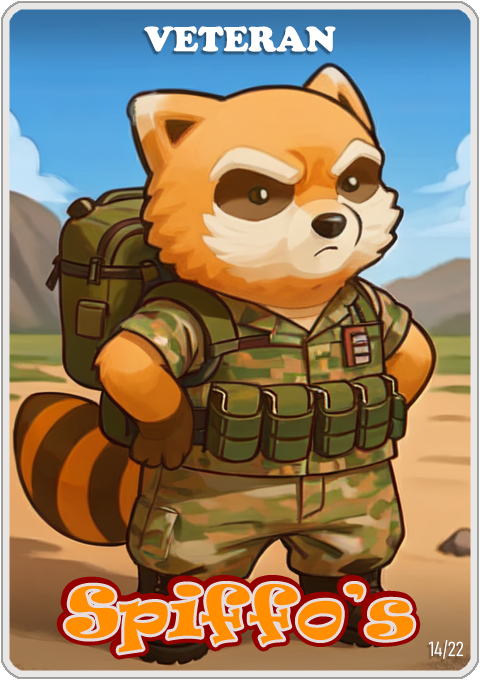
<style>
.page{position:relative;width:480px;height:680px}
.page>*{position:absolute;margin:0}
.t1{font:36px "CooperBlack";color:#ffffff}
.t2{font:65px "Ravie";color:#ff8e00}
.t3{font:20px "Bahnschrift-LightCondensed";color:#ffffff}
</style>
<div class="page">
<p class="t1" style="left:144px;top:26px;width:192px;height:26px">VETERAN</p>
<p class="t2" style="left:65px;top:584px;width:349px;height:69px">Spiffo’s</p>
<p class="t3" style="left:429px;top:640px;width:34px;height:19px">14/22</p>
</div>
